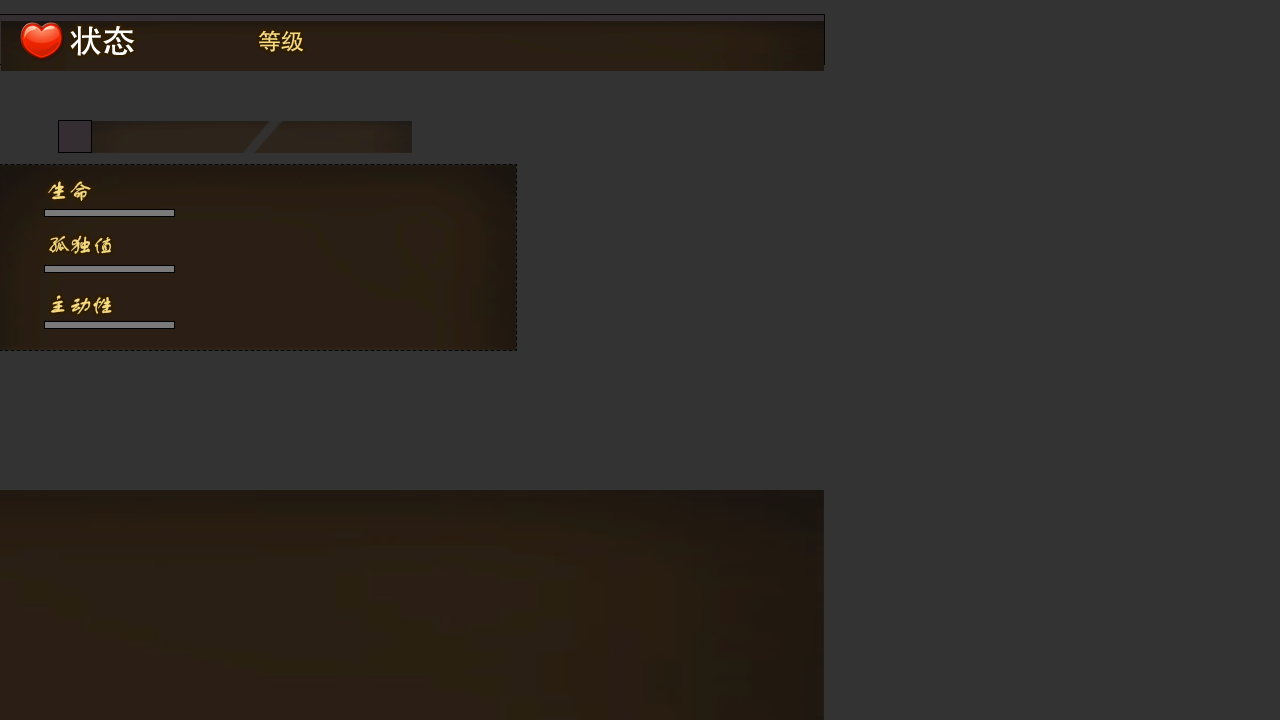
<style>
.page{position:relative;width:1280px;height:720px;background:#333333}
.page>*{position:absolute;margin:0}
.t1{font:32.3px "FZHTJW--GB1-0";letter-spacing:-0.025em;color:#ffffff;scale:1.04 1}
.t2{font:22.3px "FZHTJW--GB1-0";letter-spacing:-0.025em;color:#f8da7f;scale:1.04 1}
.t3{font:22.3px "FZSTK--GBK1-0";letter-spacing:-0.025em;color:#f8da7f;scale:1.04 1}
</style>
<div class="page">
<p class="t1" style="left:70px;top:26px;width:65px;height:30px">状态</p>
<p class="t2" style="left:258px;top:30px;width:46px;height:22px">等级</p>
<p class="t3" style="left:48px;top:181px;width:43px;height:20px">生命</p>
<p class="t3" style="left:49px;top:235px;width:62px;height:19px">孤独值</p>
<p class="t3" style="left:51px;top:295px;width:61px;height:20px">主动性</p>
</div>
